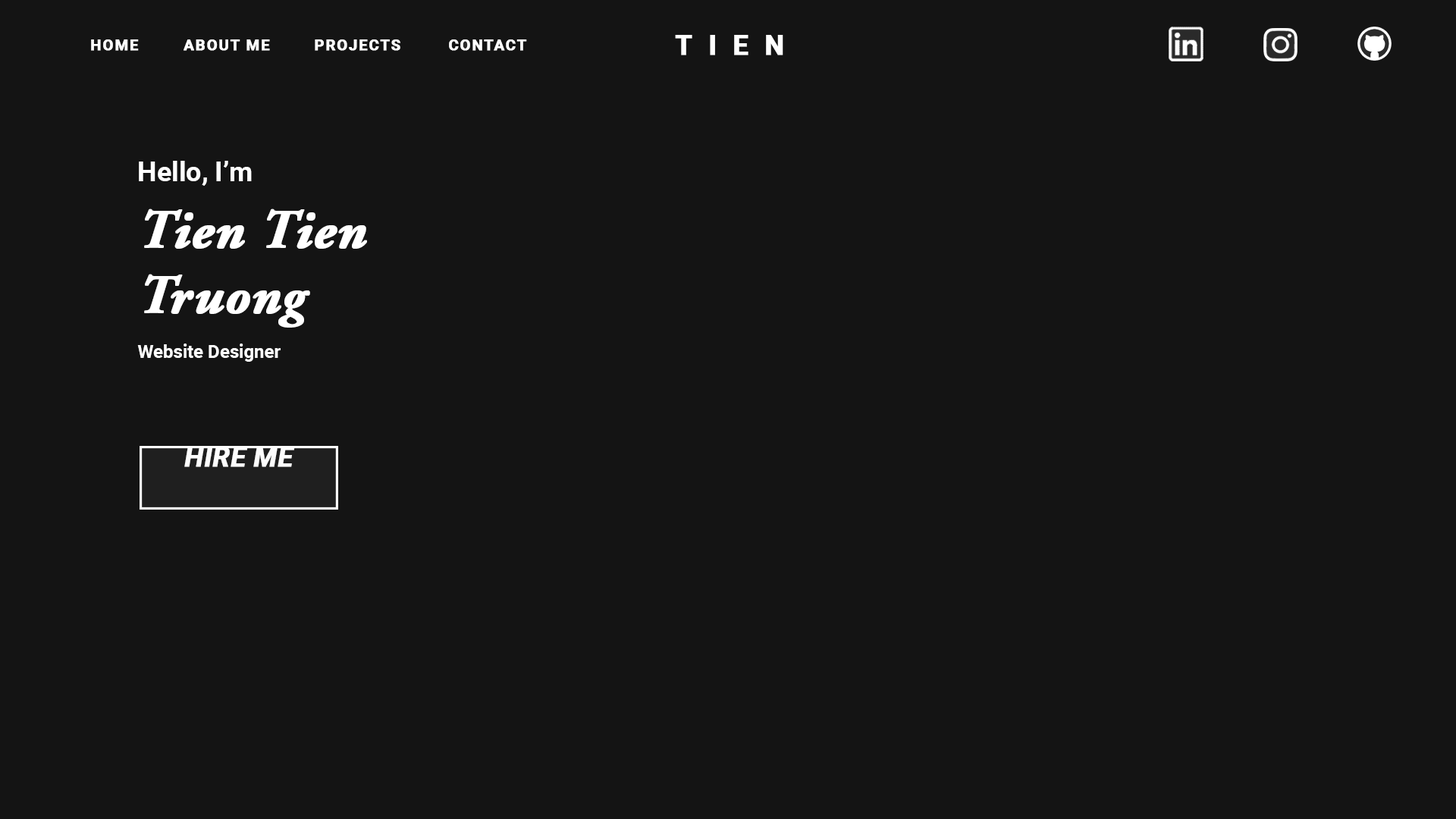
<style>
.page{position:relative;width:1456px;height:819px;background:#141414}
.page>*{position:absolute;margin:0}
.t1{font:15.2px "Roboto-Bold";letter-spacing:0.075em;color:#ffffff;font-weight:bold}
.t2{font:27.3px "Roboto-Bold";letter-spacing:0.58em;color:#ffffff;font-weight:bold}
.t3{font:54.6px "AGaramondPro-BoldItalic";color:#ffffff;font-weight:bold}
.t4{font:27.3px "Roboto-Bold";color:#ffffff}
.t5{font:18.2px/45.5px "Roboto-Bold";color:#ffffff}
.t6{font:27.3px "Roboto-BoldItalic";color:#fdfdfd;font-weight:bold}
</style>
<div class="page">
<p class="t1" style="left:91px;top:39px;width:48px;height:12px">HOME</p>
<p class="t1" style="left:184px;top:39px;width:86px;height:12px">ABOUT ME</p>
<p class="t1" style="left:315px;top:39px;width:85px;height:12px">PROJECTS</p>
<p class="t1" style="left:449px;top:39px;width:78px;height:12px">CONTACT</p>
<p class="t2" style="left:675px;top:35px;width:108px;height:20px">TIEN</p>
<p class="t3" style="left:137px;top:161px;width:230px;height:201px"><span class="t4">Hello, I’m<br></span>Tien Tien<br>Truong<br><span class="t5">Website Designer</span></p>
<p class="t6" style="left:184px;top:447px;width:111px;height:20px">HIRE ME</p>
</div>
